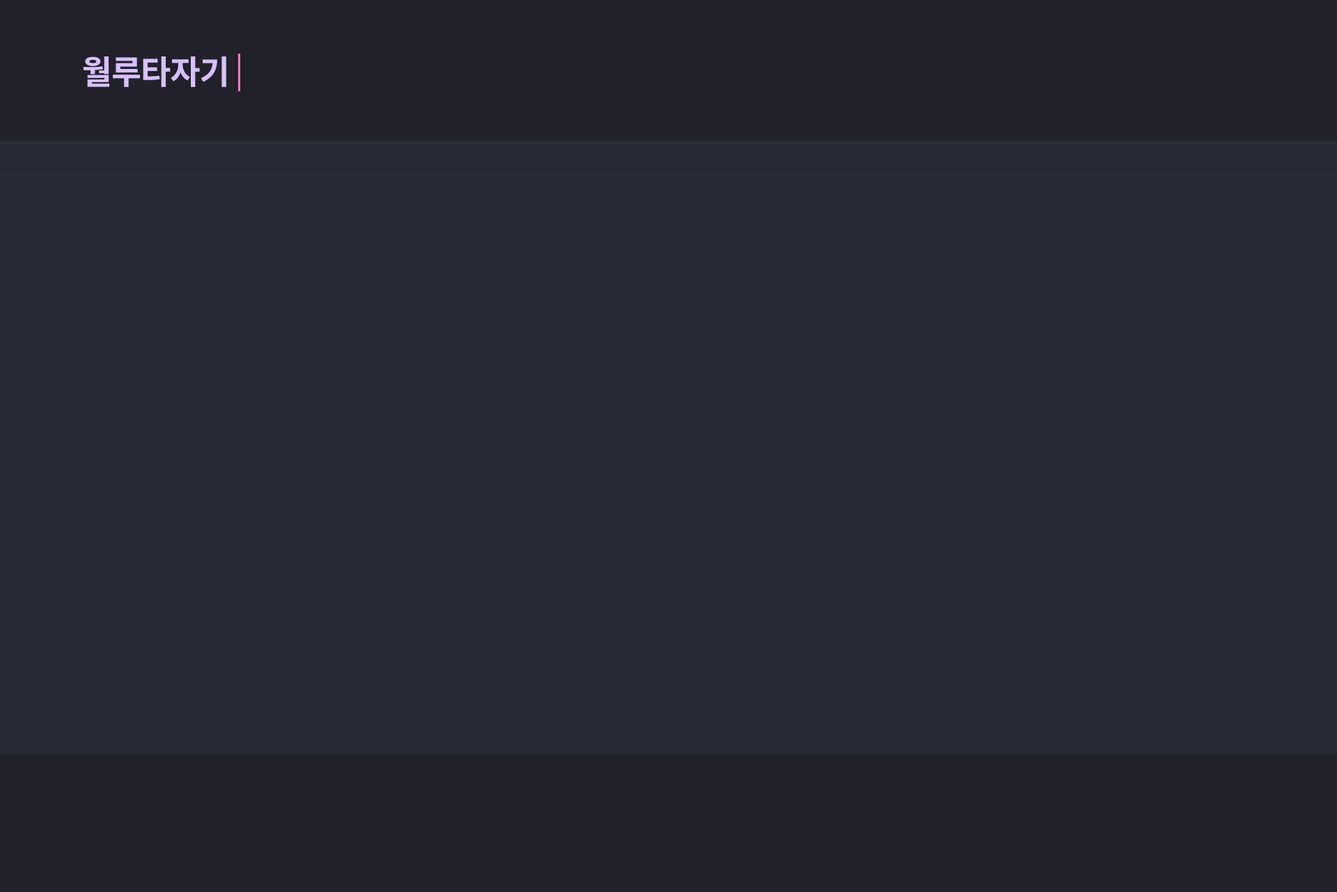
<style>
.page{position:relative;width:1337px;height:892px;background:#282a36}
.page>*{position:absolute;margin:0}
.t1{font:32.8px "NotoSansKR-Bold";letter-spacing:-0.015em;color:#d9bfff}
</style>
<div class="page">
<p class="t1" style="left:83px;top:56px;width:143px;height:31px">월루타자기</p>
</div>
